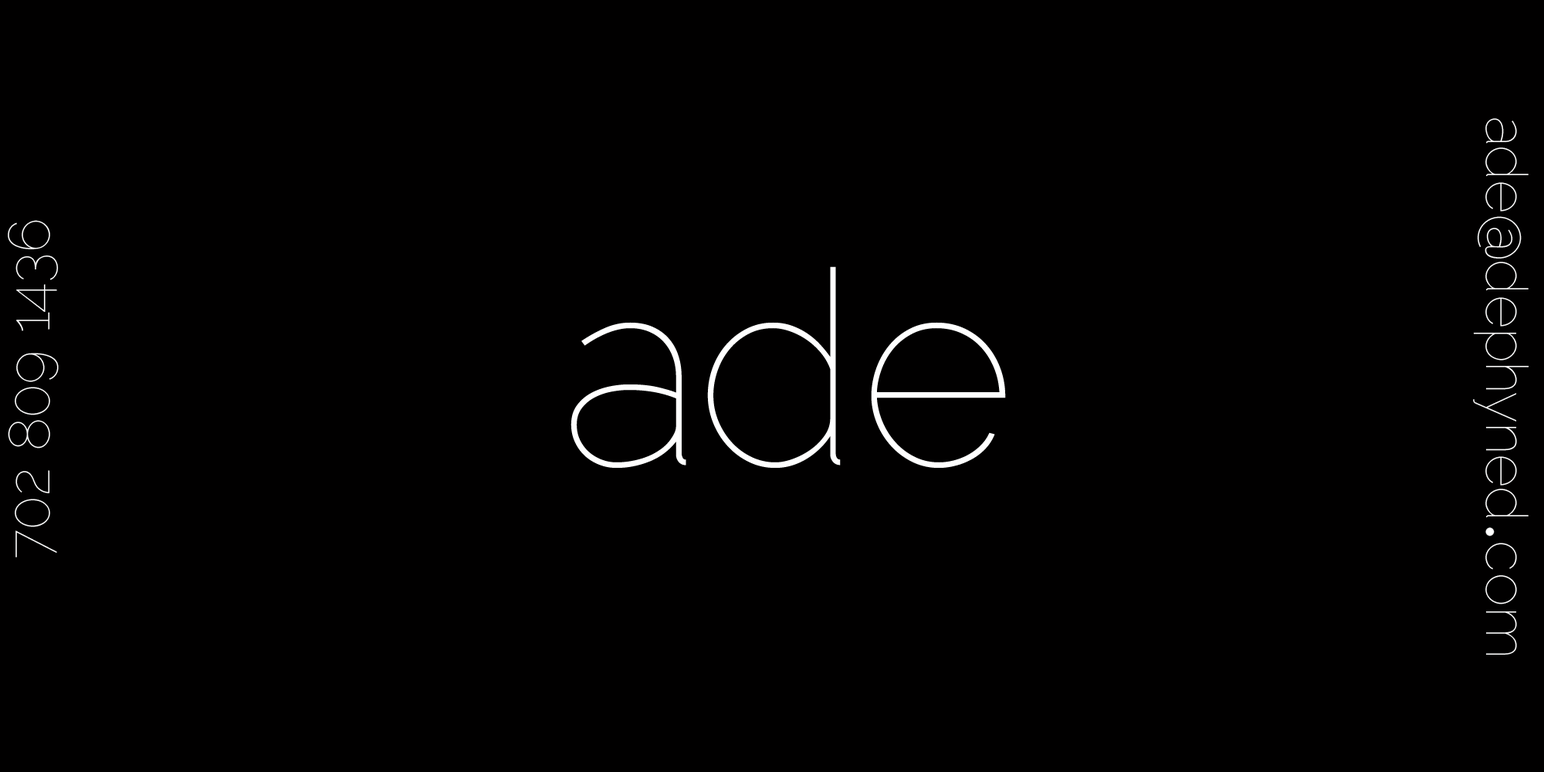
<style>
.page{position:relative;width:1544px;height:772px;background:#010000}
.page>*{position:absolute;margin:0}
.t1{font:57.9px "Raleway-Thin";color:#ffffff}
.t2{font:270.3px "Raleway-Thin";color:#ffffff}
</style>
<div class="page">
<p class="t1" style="left:1473px;top:118px;width:57px;height:538px;rotate:90deg">ade@dephyned com</p>
<p class="t1" style="left:8px;top:220px;width:51px;height:337px;rotate:-90deg">702 809 1436</p>
<p class="t2" style="left:571px;top:266px;width:435px;height:202px">ade</p>
</div>
